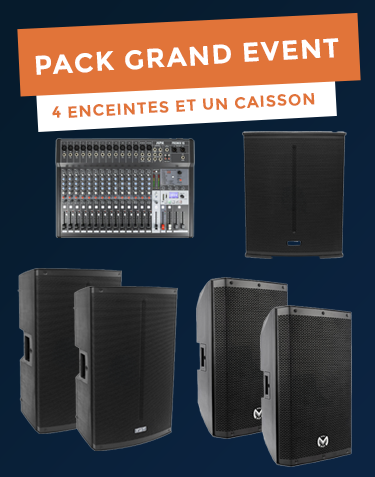
<style>
.page{position:relative;width:375px;height:477px}
.page>*{position:absolute;margin:0}
.t1{font:27px "Montserrat-Bold";letter-spacing:0.05em;color:#ffffff;text-transform:uppercase}
.t2{font:16.2px "Montserrat-Bold";letter-spacing:0.05em;color:#e17439;text-transform:uppercase}
</style>
<div class="page">
<p class="t1" style="left:35px;top:38px;width:304px;height:37px;rotate:-3deg">PACK GRAND EVENT</p>
<p class="t2" style="left:52px;top:93px;width:263px;height:25px;rotate:-3deg">4 ENCEINTES ET UN CAISSON</p>
</div>
